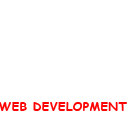
<style>
.page{position:relative;width:128px;height:128px;background:#ffffff}
.page>*{position:absolute;margin:0}
.t1{font:12.2px "ComicSansMS-Bold";color:#fe0303}
</style>
<div class="page">
<p class="t1" style="left:0px;top:102px;width:127px;height:9px">WEB DEVELOPMENT</p>
</div>
